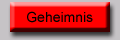
<style>
.page{position:relative;width:120px;height:40px;background:#ff0000}
.page>*{position:absolute;margin:0}
.t1{font:14px "ArialMT";color:#000000}
</style>
<div class="page">
<p class="t1" style="left:27px;top:11px;width:66px;height:12px">Geheimnis</p>
</div>
